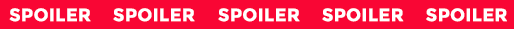
<style>
.page{position:relative;width:514px;height:29px;background:#f90634}
.page>*{position:absolute;margin:0}
.t1{font:17.9px "Montserrat-Bold";color:#ffffff;font-weight:bold}
</style>
<div class="page">
<p class="t1" style="left:9px;top:8px;width:82px;height:14px">SPOILER</p>
<p class="t1" style="left:113px;top:8px;width:82px;height:14px">SPOILER</p>
<p class="t1" style="left:218px;top:8px;width:82px;height:14px">SPOILER</p>
<p class="t1" style="left:322px;top:8px;width:82px;height:14px">SPOILER</p>
<p class="t1" style="left:426px;top:8px;width:81px;height:14px">SPOILER</p>
</div>
